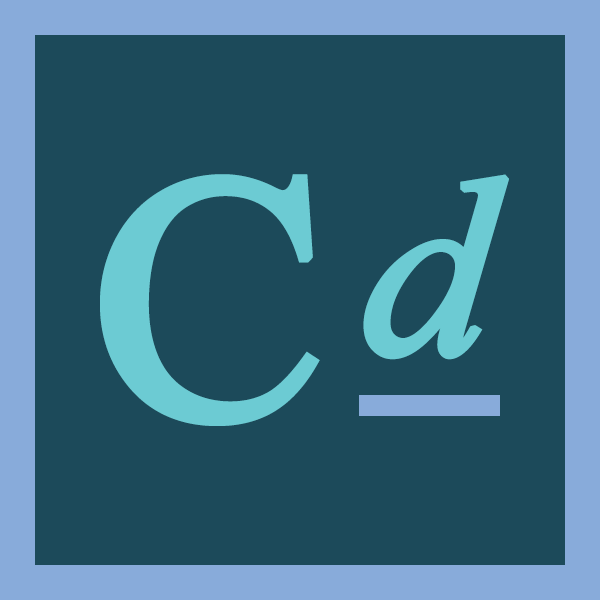
<style>
.page{position:relative;width:600px;height:600px;background:#1c4a5a}
.page>*{position:absolute;margin:0}
.t1{font:350px "TimesNewRomanPSMT";color:#6ccbd3;font-weight:bold}
.t2{font:250px "TimesNewRomanPS-ItalicMT";color:#6ccbd3;font-weight:bold}
</style>
<div class="page">
<p class="t1" style="left:100px;top:174px;width:220px;height:252px">C</p>
<p class="t2" style="left:363px;top:174px;width:146px;height:186px">d</p>
</div>
